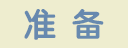
<style>
.page{position:relative;width:128px;height:48px;background:#eeedcf}
.page>*{position:absolute;margin:0}
.t1{font:32px "STYuanti-SC-Bold";color:#6789af}
</style>
<div class="page">
<p class="t1" style="left:24px;top:9px;width:80px;height:31px">准  备</p>
</div>
